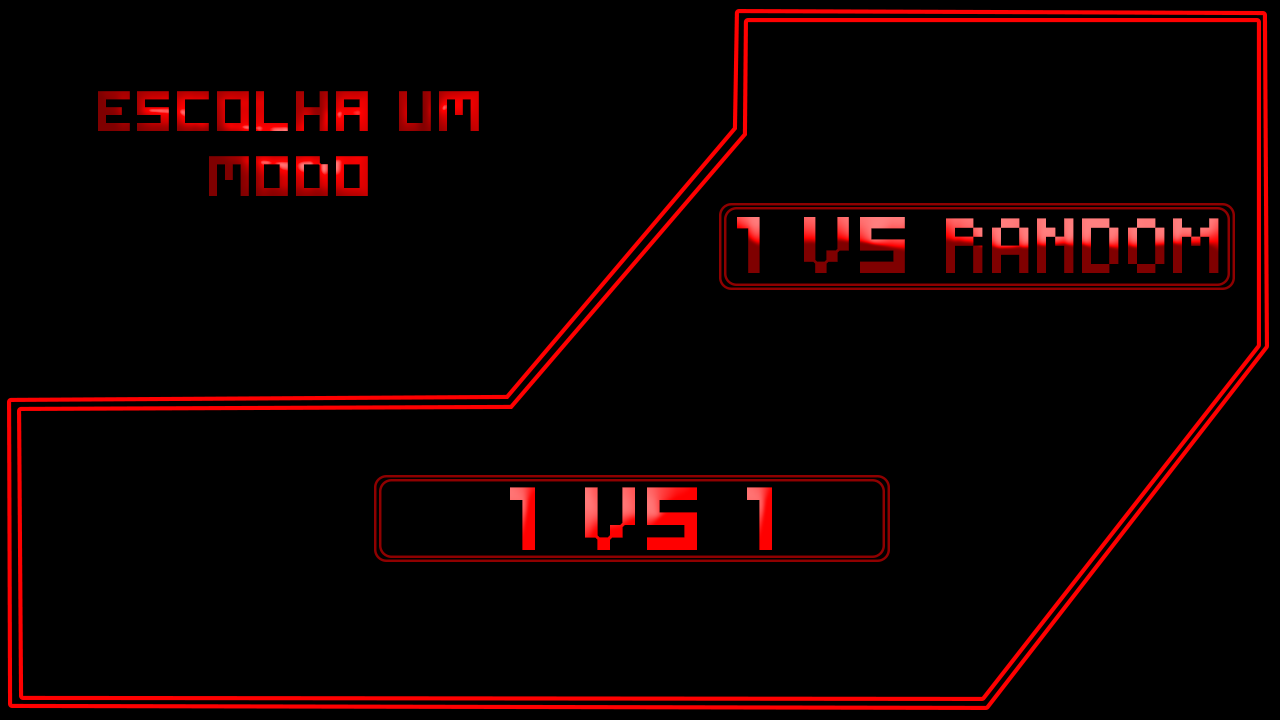
<style>
.page{position:relative;width:1280px;height:720px;background:#000000}
.page>*{position:absolute;margin:0}
.t1{font:54.2px "Symtext"}
.t2{font:45.3px "Pixeled"}
.t3{font:76.4px "Symtext"}
.t4{font:85.3px "Symtext"}
</style>
<div class="page">
<p class="t1" style="left:98px;top:91px;width:381px;height:105px;text-align:center">ESCOLHA UM MODO</p>
<p class="t2" style="left:737px;top:217px;width:482px;height:56px"><span class="t3">1 vs </span>RANDOM</p>
<p class="t4" style="left:510px;top:487px;width:262px;height:63px">1 vs 1</p>
</div>
